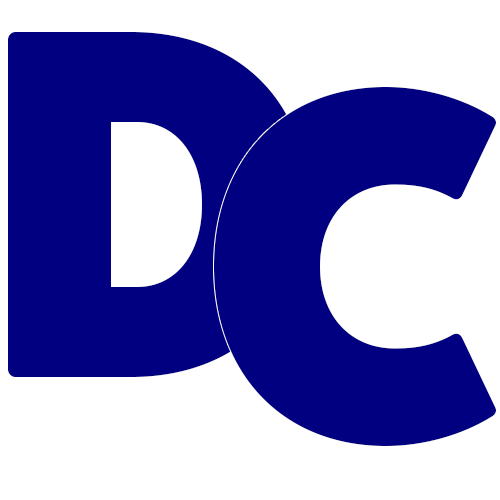
<style>
.page{position:relative;width:500px;height:500px;background:#ffffff}
.page>*{position:absolute;margin:0}
.t1{font:500px "FatFrank-Heavy";color:#000080;text-transform:uppercase}
</style>
<div class="page">
<p class="t1" style="left:8px;top:32px;width:300px;height:345px">D</p>
<p class="t1" style="left:214px;top:87px;width:282px;height:359px">C</p>
</div>
